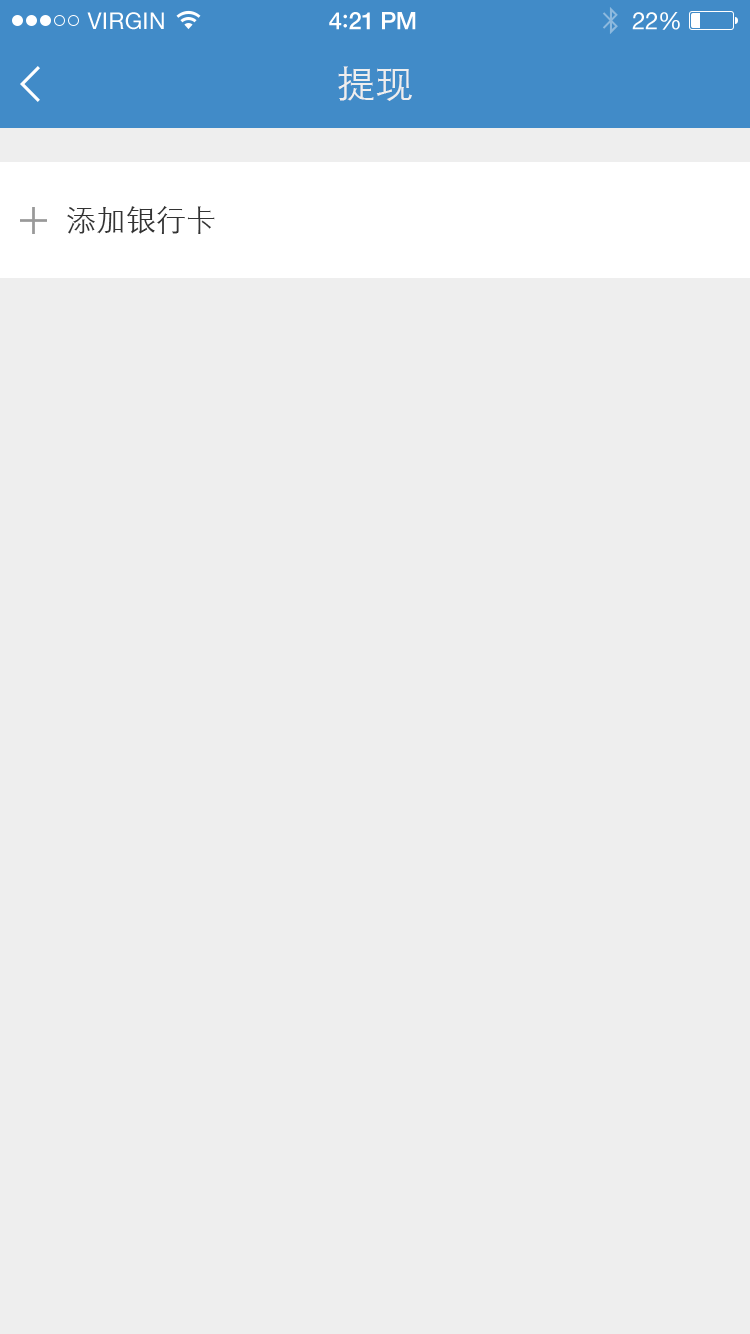
<style>
.page{position:relative;width:750px;height:1334px;background:#eeeeee}
.page>*{position:absolute;margin:0}
.t1{font:23px "HelveticaNeue";letter-spacing:0.02em;color:#ffffff}
.t2{font:24px "HelveticaNeue-Medium";letter-spacing:-0.02em;color:#ffffff}
.t3{font:26px "Avenir-Medium";letter-spacing:-0.02em;color:#ffffff}
.t4{font:24px "HelveticaNeue";letter-spacing:-0.02em;color:#ffffff}
.t5{font:38px "STXihei";color:#eeeeee}
.t6{font:30px "STXihei";color:#333333}
</style>
<div class="page">
<p class="t1" style="left:87px;top:12px;width:77px;height:18px">VIRGIN</p>
<p class="t2" style="left:329px;top:12px;width:87px;height:18px">4<span class="t3">:</span>21 PM</p>
<p class="t4" style="left:632px;top:12px;width:48px;height:18px">22%</p>
<p class="t5" style="left:338px;top:66px;width:74px;height:35px">提现</p>
<p class="t6" style="left:67px;top:206px;width:148px;height:28px">添加银行卡</p>
</div>
